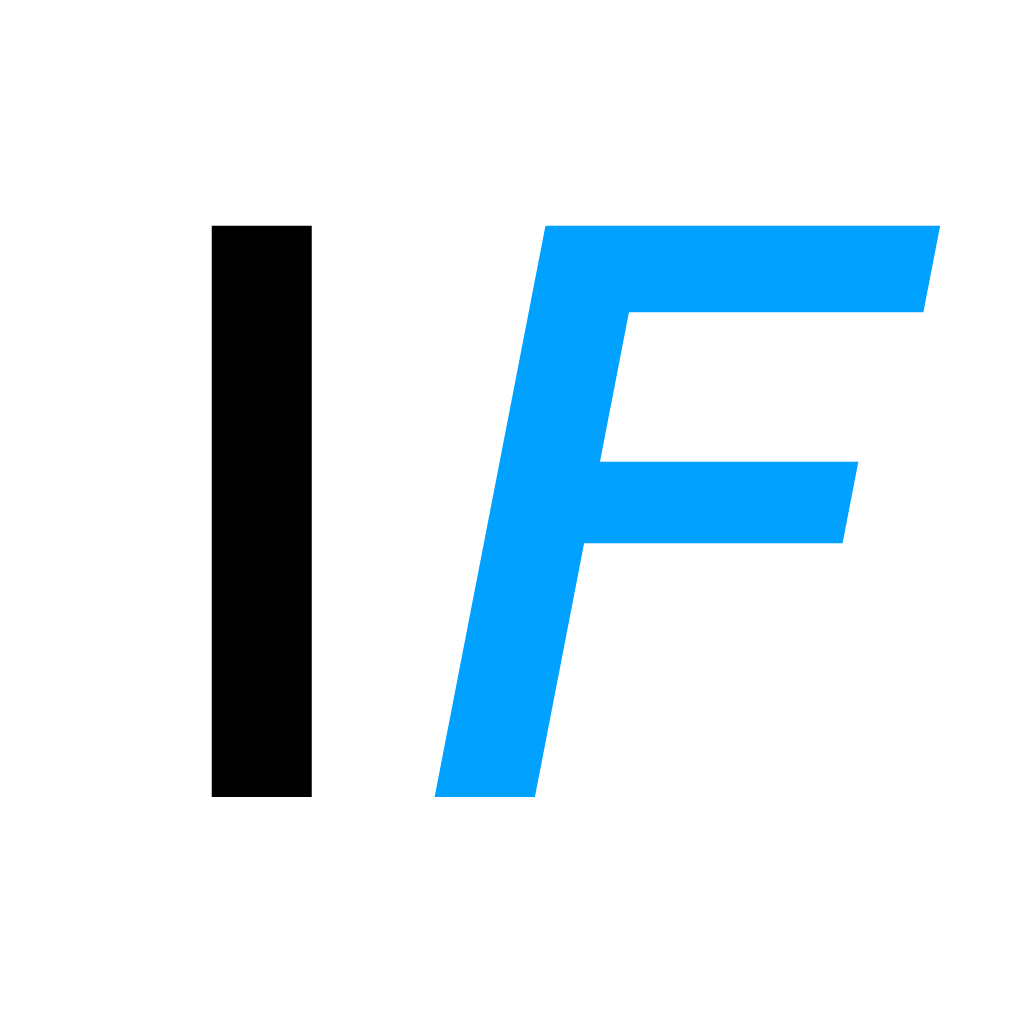
<style>
.page{position:relative;width:1024px;height:1024px;background:#ffffff}
.page>*{position:absolute;margin:0}
.t1{font:800px "HelveticaNeue-Medium";color:#000000}
.t2{font:800px "HelveticaNeue-Medium";color:#00a1ff;font-style:italic}
</style>
<div class="page">
<p class="t1" style="left:211px;top:225px;width:730px;height:572px">I<span class="t2">F</span></p>
</div>
